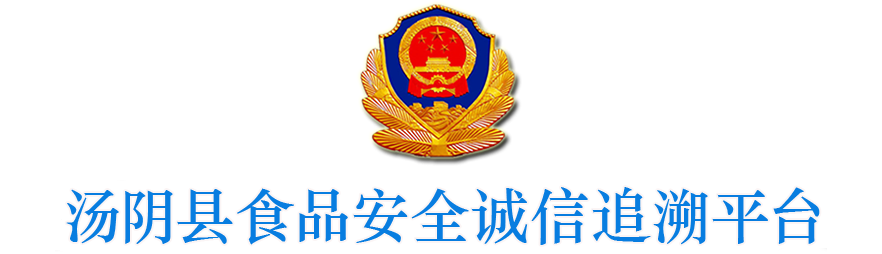
<style>
.page{position:relative;width:882px;height:254px;background:#ffffff}
.page>*{position:absolute;margin:0}
.t1{font:60px "STZhongsong";letter-spacing:0.05em;color:#087de0}
</style>
<div class="page">
<p class="t1" style="left:66px;top:187px;width:754px;height:58px">汤阴县食品安全诚信追溯平台</p>
</div>
